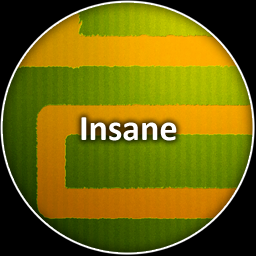
<style>
.page{position:relative;width:256px;height:256px;background:#000000}
.page>*{position:absolute;margin:0}
.t1{font:36px "Calibri-Bold";color:#ffffff}
</style>
<div class="page">
<p class="t1" style="left:81px;top:117px;width:96px;height:24px">Insane</p>
</div>
